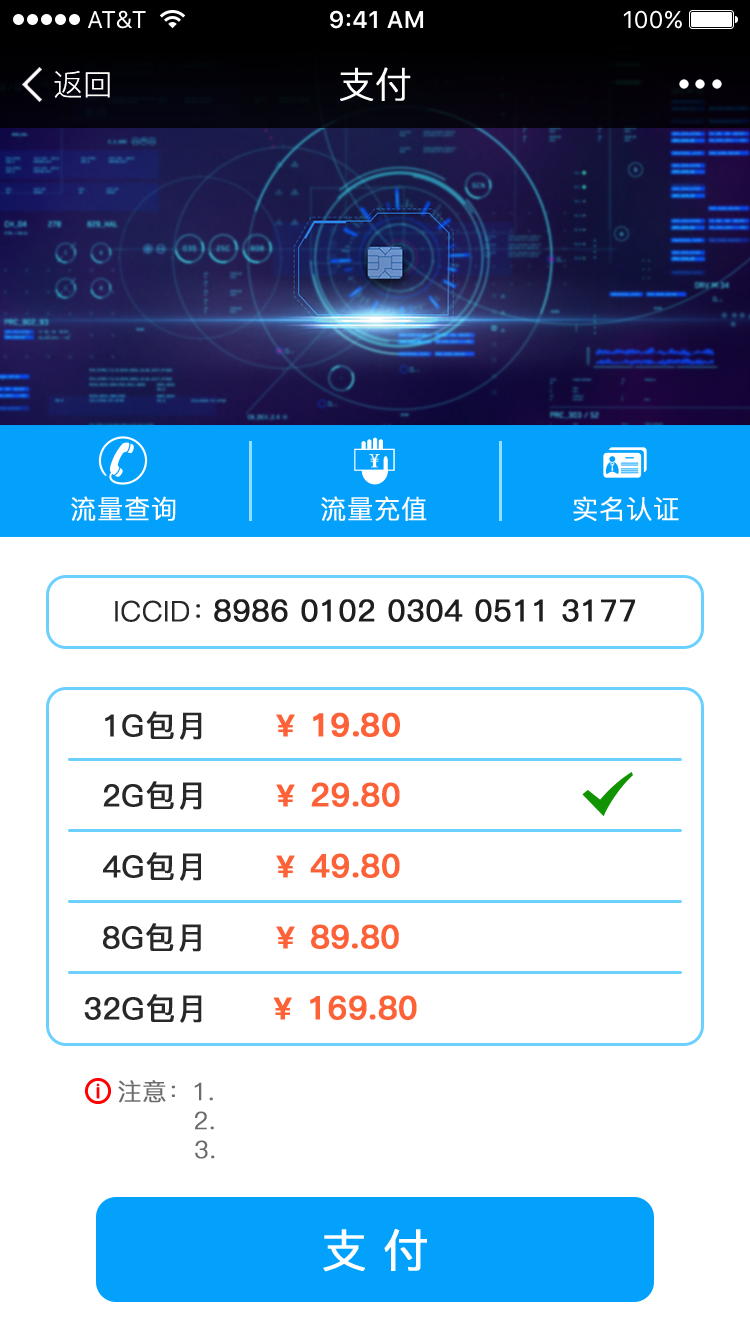
<style>
.page{position:relative;width:750px;height:1334px;background:#ffffff}
.page>*{position:absolute;margin:0}
.t1{font:30px "PingFang-SC-Regular";color:#fffefd}
.t2{font:36px "PingFang-SC-Regular";color:#fffefd;font-weight:bold}
.t3{font:26px "PingFang-SC-Regular";color:#fffefd;font-weight:bold}
.t4{font:28px "PingFang-SC-Regular";color:#282828;font-weight:bold}
.t5{font:30px "PingFang-SC-Medium";color:#1e1e1e;font-weight:bold}
.t6{font:30px "PingFang-SC-Medium";color:#282828;font-weight:bold}
.t7{font:32px "PingFang-SC-Heavy";color:#fc6137;font-weight:bold}
.t8{font:30px "PingFang-SC-Bold";color:#fc6137;font-weight:bold}
.t9{font:30.1px "PingFang-SC-Medium";color:#282828;font-weight:bold}
.t10{font:30.1px "PingFang-SC-Bold";color:#fc6137;font-weight:bold}
.t11{font:32.1px "PingFang-SC-Bold";color:#fc6137;font-weight:bold}
.t12{font:24px "PingFang-SC-Regular";color:#6b6b6b;font-weight:bold}
.t13{font:45px "PingFang-SC-Medium";color:#ffffff;font-weight:bold}
</style>
<div class="page">
<p class="t1" style="left:54px;top:71px;width:56px;height:27px">返回</p>
<p class="t2" style="left:340px;top:67px;width:71px;height:34px">支付</p>
<p class="t3" style="left:71px;top:496px;width:105px;height:25px">流量查询</p>
<p class="t3" style="left:321px;top:496px;width:106px;height:25px">流量充值</p>
<p class="t3" style="left:573px;top:496px;width:106px;height:25px">实名认证</p>
<p class="t4" style="left:115px;top:600px;width:85px;height:22px">ICCID：</p>
<p class="t5" style="left:214px;top:599px;width:421px;height:23px">8986 0102 0304 0511 3177</p>
<p class="t6" style="left:105px;top:711px;width:97px;height:29px">1G包月</p>
<p class="t7" style="left:313px;top:712px;width:87px;height:25px">19.80</p>
<p class="t8" style="left:276px;top:714px;width:19px;height:23px">￥</p>
<p class="t9" style="left:103px;top:781px;width:99px;height:29px">2G包月</p>
<p class="t10" style="left:276px;top:784px;width:19px;height:23px">￥</p>
<p class="t11" style="left:311px;top:782px;width:89px;height:25px">29.80</p>
<p class="t9" style="left:103px;top:852px;width:98px;height:29px">4G包月</p>
<p class="t10" style="left:276px;top:855px;width:19px;height:23px">￥</p>
<p class="t11" style="left:310px;top:853px;width:90px;height:25px">49.80</p>
<p class="t9" style="left:103px;top:923px;width:98px;height:29px">8G包月</p>
<p class="t10" style="left:276px;top:926px;width:19px;height:23px">￥</p>
<p class="t11" style="left:311px;top:924px;width:88px;height:25px">89.80</p>
<p class="t9" style="left:84px;top:994px;width:118px;height:29px">32G包月</p>
<p class="t10" style="left:273px;top:997px;width:19px;height:23px">￥</p>
<p class="t11" style="left:310px;top:995px;width:107px;height:25px">169.80</p>
<p class="t12" style="left:118px;top:1080px;width:97px;height:79px">注意：1.<br>        2.<br>        3.</p>
<p class="t13" style="left:323px;top:1229px;width:104px;height:43px">支 付</p>
</div>
